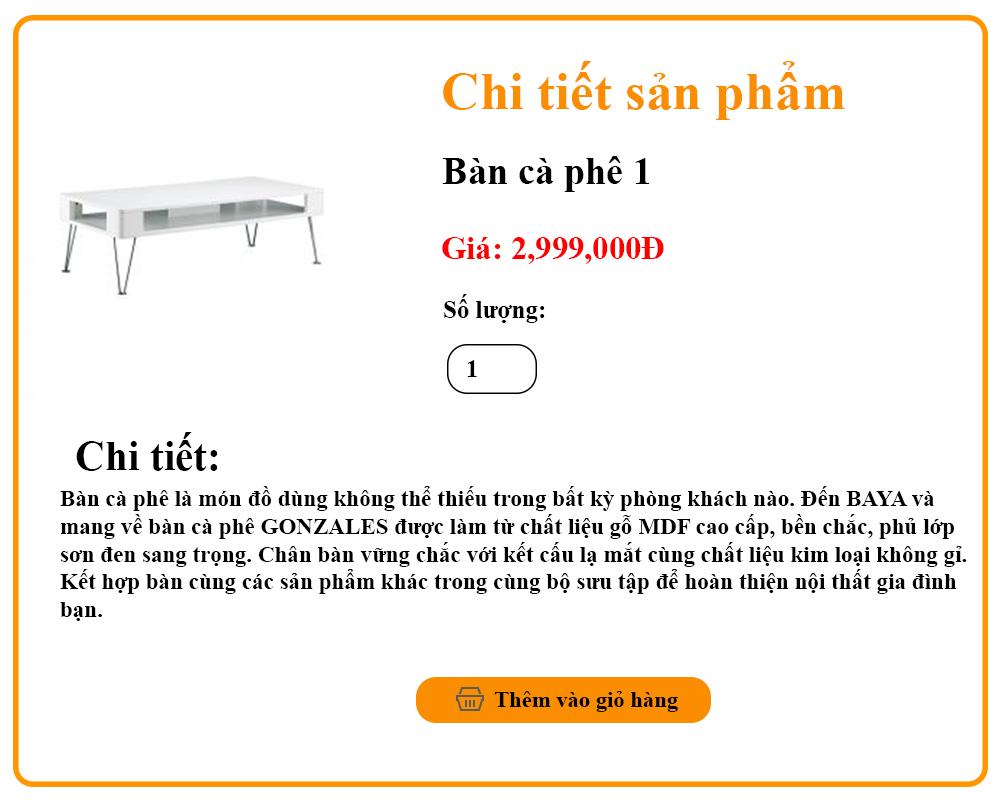
<style>
.page{position:relative;width:1000px;height:800px;background:#ffffff}
.page>*{position:absolute;margin:0}
.t1{font:53.3px "TimesNewRomanPS-BoldMT";color:#fa8d00}
.t2{font:38px "TimesNewRomanPS-BoldMT";color:#000000}
.t3{font:32.8px "TimesNewRomanPS-BoldMT";color:#ff0000}
.t4{font:25px "TimesNewRomanPS-BoldMT";color:#000000}
.t5{font:41.8px "TimesNewRomanPS-BoldMT";color:#000000}
.t6{font:23px "TimesNewRomanPS-BoldMT";color:#000000}
</style>
<div class="page">
<p class="t1" style="left:443px;top:61px;width:402px;height:59px">Chi tiết sản phẩm</p>
<p class="t2" style="left:442px;top:156px;width:208px;height:36px">Bàn cà phê 1</p>
<p class="t3" style="left:442px;top:237px;width:222px;height:27px">Giá: 2,999,000Đ</p>
<p class="t4" style="left:444px;top:294px;width:101px;height:29px">Số lượng:</p>
<p class="t5" style="left:76px;top:432px;width:142px;height:39px">Chi tiết:</p>
<p class="t6" style="left:60px;top:486px;width:907px;height:135px">Bàn cà phê là món đồ dùng không thể thiếu trong bất kỳ phòng khách nào. Đến BAYA và <br>mang về bàn cà phê GONZALES được làm từ chất liệu gỗ MDF cao cấp, bền chắc, phủ lớp <br>sơn đen sang trọng. Chân bàn vững chắc với kết cấu lạ mắt cùng chất liệu kim loại không gỉ. <br>Kết hợp bàn cùng các sản phẩm khác trong cùng bộ sưu tập để hoàn thiện nội thất gia đình <br>bạn.</p>
</div>
